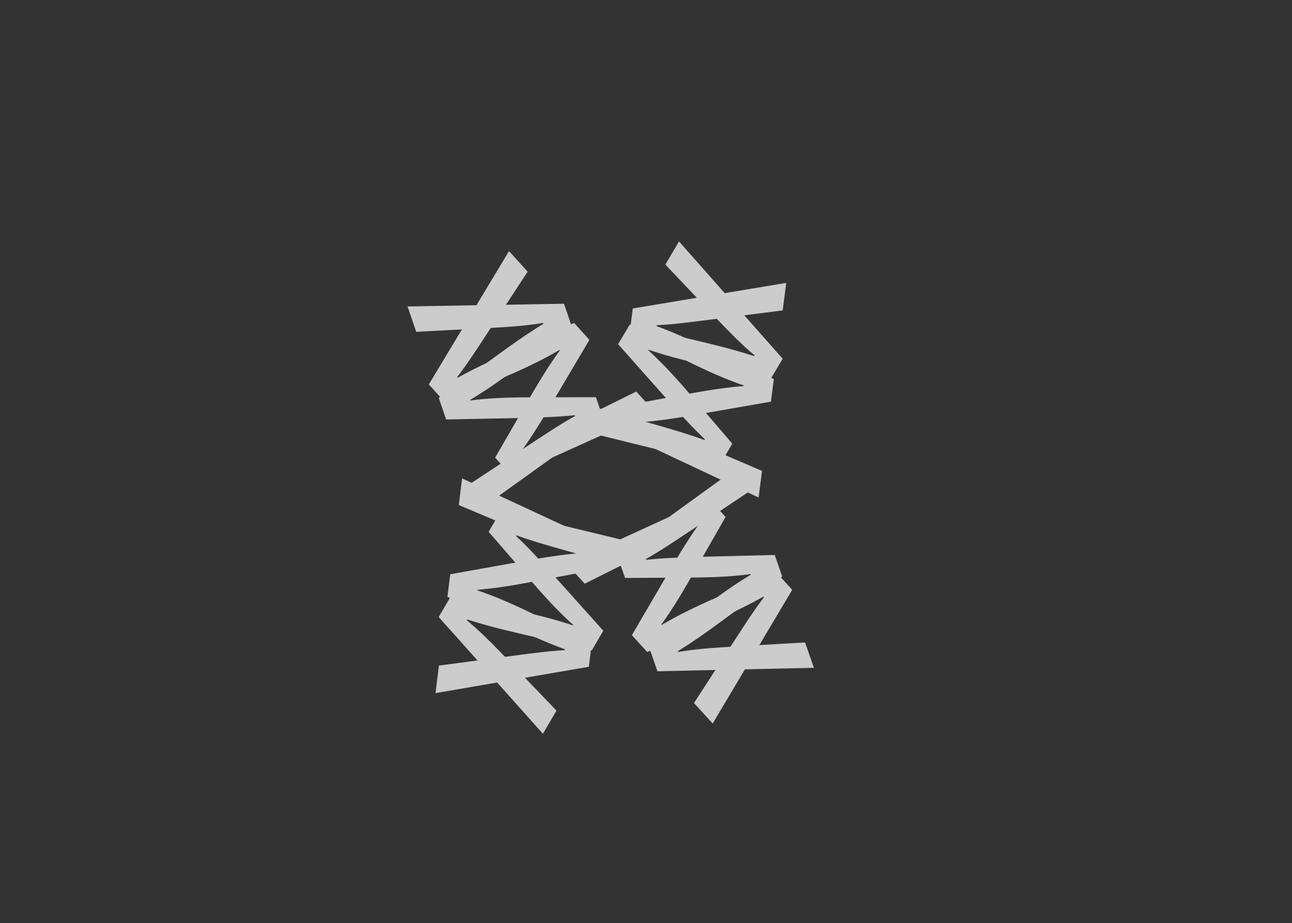
<style>
.page{position:relative;width:1292px;height:923px;background:#333333}
.page>*{position:absolute;margin:0}
.t1{font:307.6px "MyriadPro-Regular";color:#cccccc}
</style>
<div class="page">
<p class="t1" style="left:569px;top:241px;width:214px;height:224px;rotate:-59deg">w</p>
<p class="t1" style="left:429px;top:251px;width:226px;height:225px;rotate:48deg">w</p>
<p class="t1" style="left:616px;top:282px;width:170px;height:216px;rotate:97deg">w</p>
<p class="t1" style="left:407px;top:303px;width:197px;height:208px;rotate:-109deg">w</p>
<p class="t1" style="left:616px;top:463px;width:198px;height:208px;rotate:71deg">w</p>
<p class="t1" style="left:435px;top:478px;width:169px;height:215px;rotate:-83deg">w</p>
<p class="t1" style="left:567px;top:498px;width:225px;height:226px;rotate:-132deg">w</p>
<p class="t1" style="left:439px;top:510px;width:214px;height:224px;rotate:120deg">w</p>
</div>
